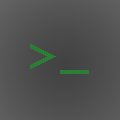
<style>
.page{position:relative;width:120px;height:120px}
.page>*{position:absolute;margin:0}
.t1{font:48px "Geneva";color:#2b7e33}
</style>
<div class="page">
<p class="t1" style="left:30px;top:44px;width:59px;height:30px">&gt;_</p>
</div>
